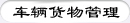
<style>
.page{position:relative;width:130px;height:23px;background:#ffffff}
.page>*{position:absolute;margin:0}
.t1{font:18px "LiSu";color:#030303}
</style>
<div class="page">
<p class="t1" style="left:13px;top:6px;width:107px;height:12px">车辆货物管理</p>
</div>
